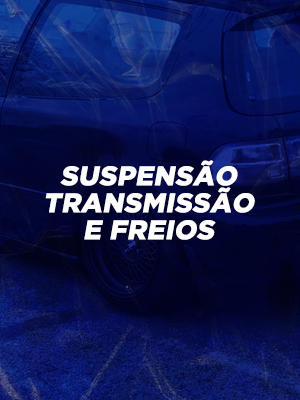
<style>
.page{position:relative;width:300px;height:400px}
.page>*{position:absolute;margin:0}
.t1{font:27px/27px "Gotham-Black";letter-spacing:0.01em;color:#fffefe;text-transform:uppercase;font-style:italic}
</style>
<div class="page">
<p class="t1" style="left:45px;top:160px;width:210px;height:80px;text-align:center">suspensão<br>transmissão<br>e freios</p>
</div>
